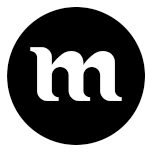
<style>
.page{position:relative;width:152px;height:152px;background:#000000}
.page>*{position:absolute;margin:0}
.t1{font:138px "Hulse";color:#000000}
</style>
<div class="page">
<p class="t1" style="left:7px;top:7px;width:138px;height:138px">m</p>
</div>
